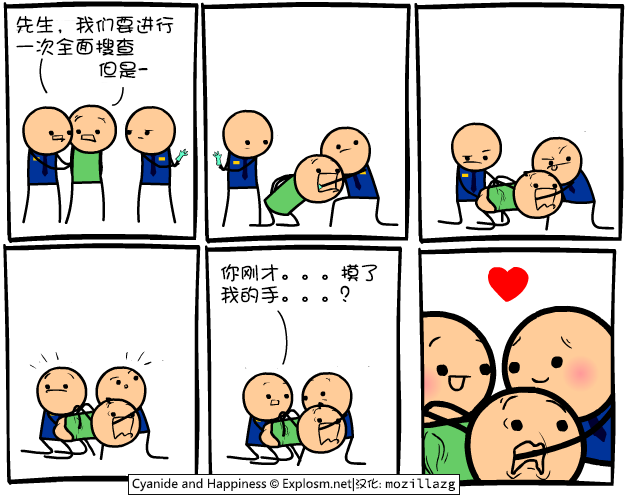
<style>
.page{position:relative;width:630px;height:500px;background:#ffffff}
.page>*{position:absolute;margin:0}
.t1{font:20px/22px "DFShaoNvW5";color:#000000}
.t2{font:20px "DFShaoNvW5";color:#000000}
</style>
<div class="page">
<p class="t1" style="left:16px;top:15px;width:158px;height:41px">先生，我们要进行<br>一次全面搜查</p>
<p class="t2" style="left:99px;top:61px;width:49px;height:18px">但是-</p>
<p class="t1" style="left:220px;top:264px;width:158px;height:40px">你刚才。。。摸了<br>我的手。。。？</p>
</div>
